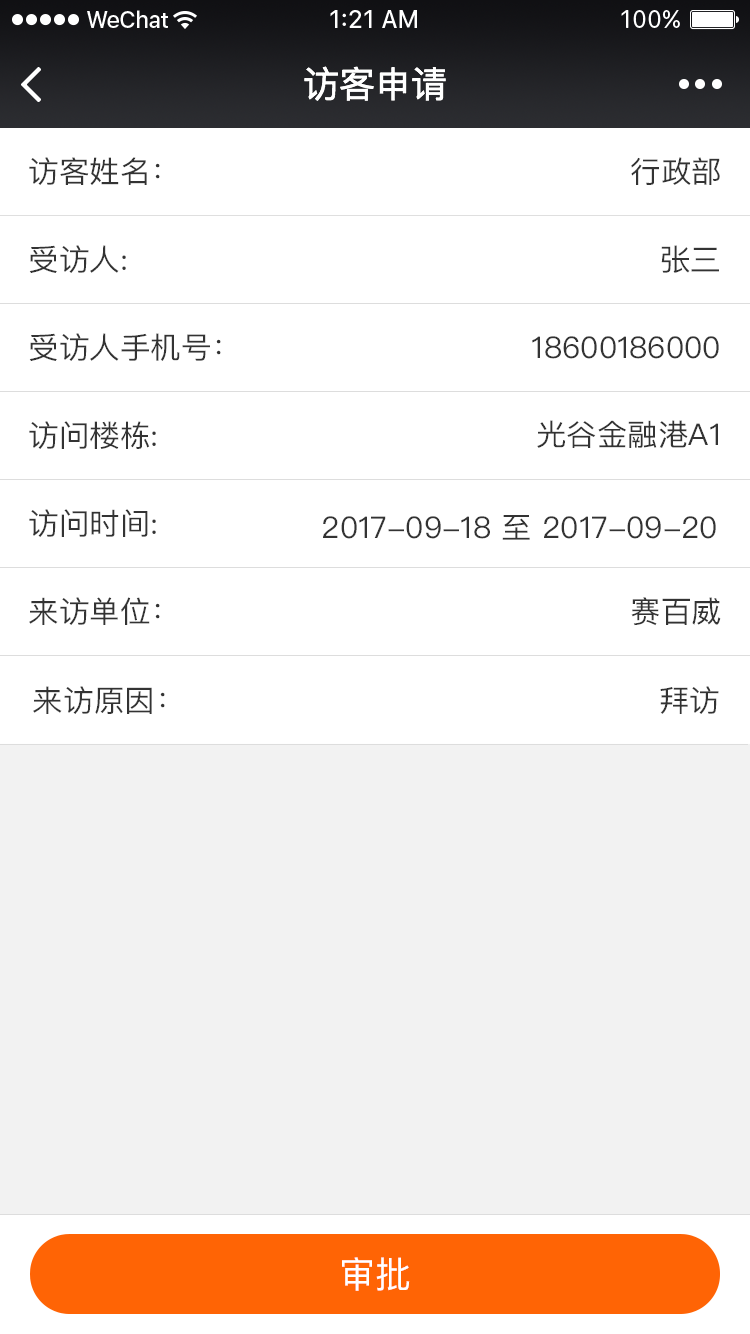
<style>
.page{position:relative;width:750px;height:1334px;background:#ffffff}
.page>*{position:absolute;margin:0}
.t1{font:36px "PingFangSC-Regular";color:#ffffff}
.t2{font:30px "PingFangSC-Regular";color:#333333}
</style>
<div class="page">
<p class="t1" style="left:304px;top:66px;width:142px;height:35px">访客申请</p>
<p class="t2" style="left:29px;top:157px;width:131px;height:28px">访客姓名：</p>
<p class="t2" style="left:631px;top:157px;width:89px;height:28px">行政部</p>
<p class="t2" style="left:29px;top:245px;width:97px;height:28px">受访人:</p>
<p class="t2" style="left:661px;top:245px;width:58px;height:28px">张三</p>
<p class="t2" style="left:29px;top:333px;width:192px;height:28px">受访人手机号：</p>
<p class="t2" style="left:532px;top:336px;width:187px;height:23px">18600186000</p>
<p class="t2" style="left:29px;top:421px;width:127px;height:28px">访问楼栋:</p>
<p class="t2" style="left:537px;top:420px;width:181px;height:28px">光谷金融港A1</p>
<p class="t2" style="left:29px;top:509px;width:127px;height:28px">访问时间:</p>
<p class="t2" style="left:323px;top:515px;width:393px;height:25px">2017-09-18 至 2017-09-20</p>
<p class="t2" style="left:29px;top:597px;width:131px;height:28px">来访单位：</p>
<p class="t2" style="left:631px;top:597px;width:90px;height:29px">赛百威</p>
<p class="t2" style="left:33px;top:686px;width:132px;height:28px">来访原因：</p>
<p class="t2" style="left:660px;top:686px;width:59px;height:28px">拜访</p>
<p class="t1" style="left:342px;top:1257px;width:68px;height:34px">审批</p>
</div>
